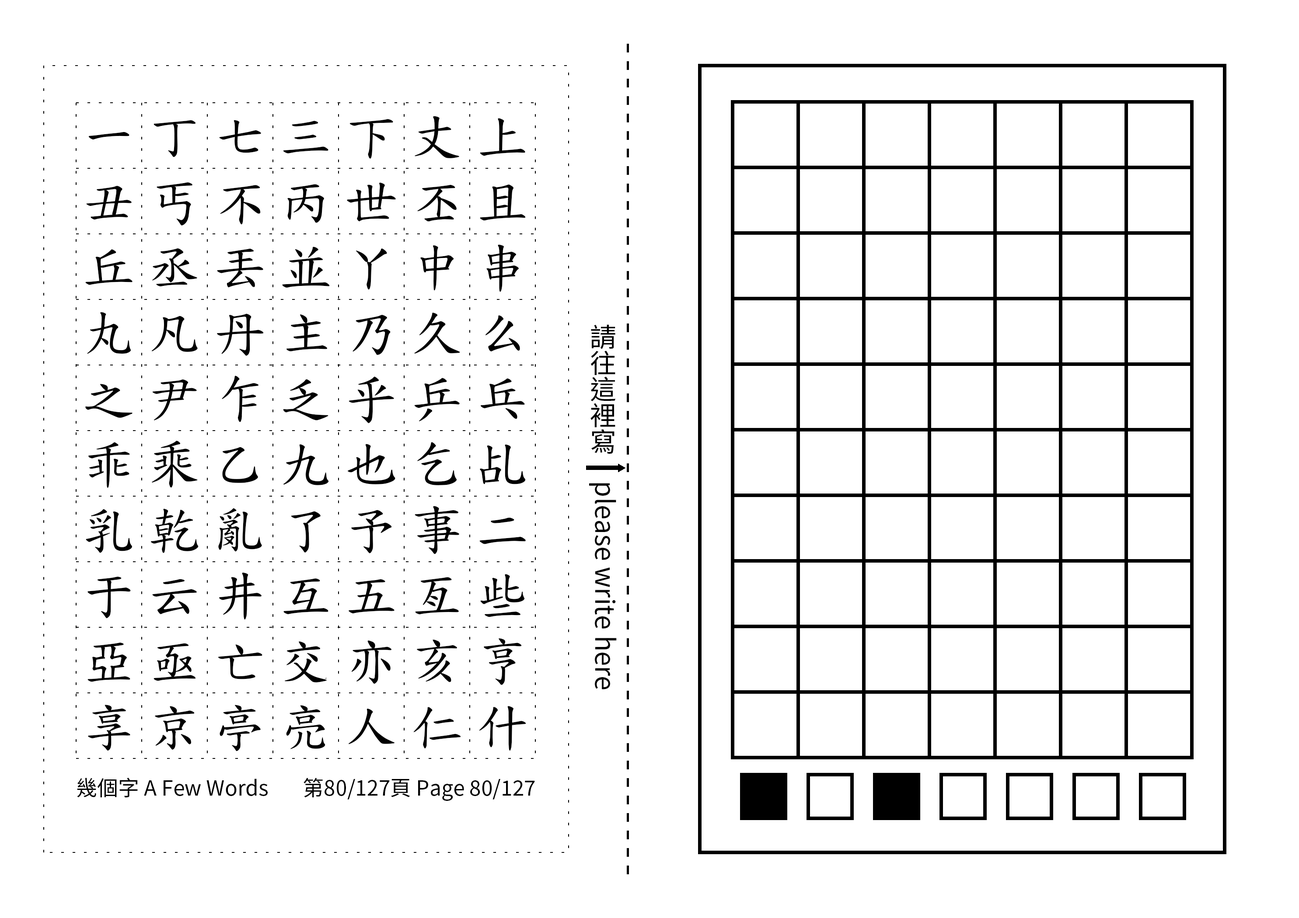
<style>
.page{position:relative;width:1299px;height:918px;background:#ffffff}
.page>*{position:absolute;margin:0}
.t1{font:52.5px/65.6px "TW-Kai-98_1";letter-spacing:0.25em;color:#000000}
.t2{font:26.2px "SourceHanSansTC-Regular";color:#000000}
.t3{font:21px "SourceHanSansTC-Regular";color:#000000}
</style>
<div class="page">
<p class="t1" style="left:85px;top:116px;width:441px;height:636px;text-align:center">一丁七三下丈上丑丐不丙世丕且丘丞丟並丫中串丸凡丹主乃久么之尹乍乏乎乒乓乖乘乙九也乞乩乳乾亂了予事二于云井互五亙些亞亟亡交亦亥亨享京亭亮人仁什</p>
<p class="t2" style="left:589px;top:324px;width:28px;height:366px;text-align:center">請往這裡寫　please write here</p>
<p class="t3" style="left:77px;top:778px;width:191px;height:20px">幾個字 A Few Words</p>
<p class="t3" style="left:303px;top:778px;width:232px;height:23px">第80/127頁 Page 80/127</p>
</div>
